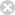
<style>
.page{position:relative;width:15px;height:15px;background:#cccccc}
.page>*{position:absolute;margin:0}
.t1{font:12.5px "LiGothicMed";color:#ffffff;scale:1.66 1}
</style>
<div class="page">
<p class="t1" style="left:2px;top:3px;width:11px;height:9px">X</p>
</div>
